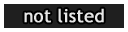
<style>
.page{position:relative;width:128px;height:32px;background:#1f1f1f}
.page>*{position:absolute;margin:0}
.t1{font:18px "TrebuchetMS";color:#e6e6e6;font-weight:bold}
</style>
<div class="page">
<p class="t1" style="left:24px;top:8px;width:80px;height:15px">not listed</p>
</div>
